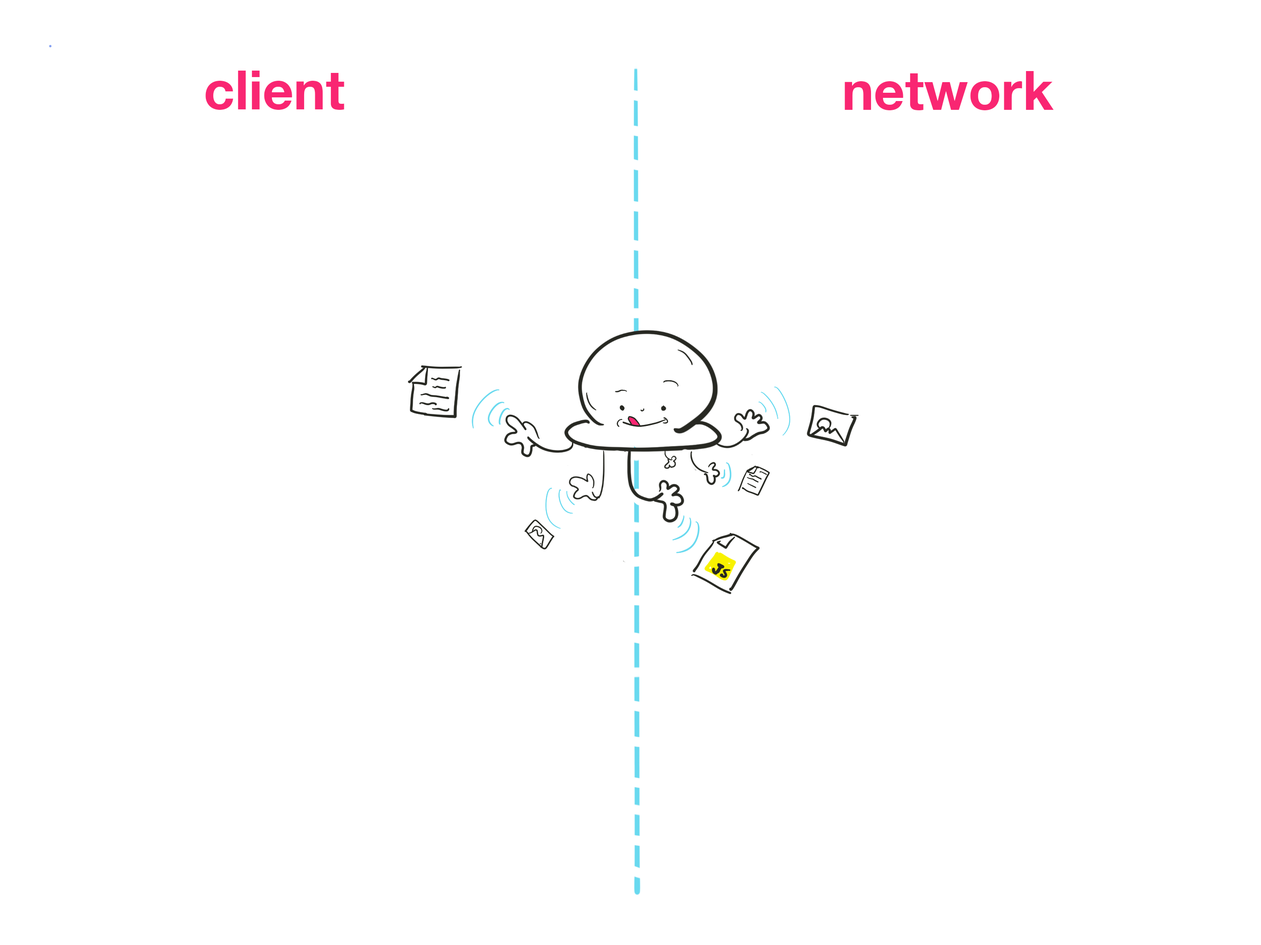
<style>
.page{position:relative;width:1261px;height:945px;background:#ffffff}
.page>*{position:absolute;margin:0}
.t1{font:54.2px "HelveticaNeue-Bold";color:#f92672}
</style>
<div class="page">
<p class="t1" style="left:205px;top:71px;width:139px;height:39px">client</p>
<p class="t1" style="left:845px;top:71px;width:209px;height:39px">network</p>
</div>
